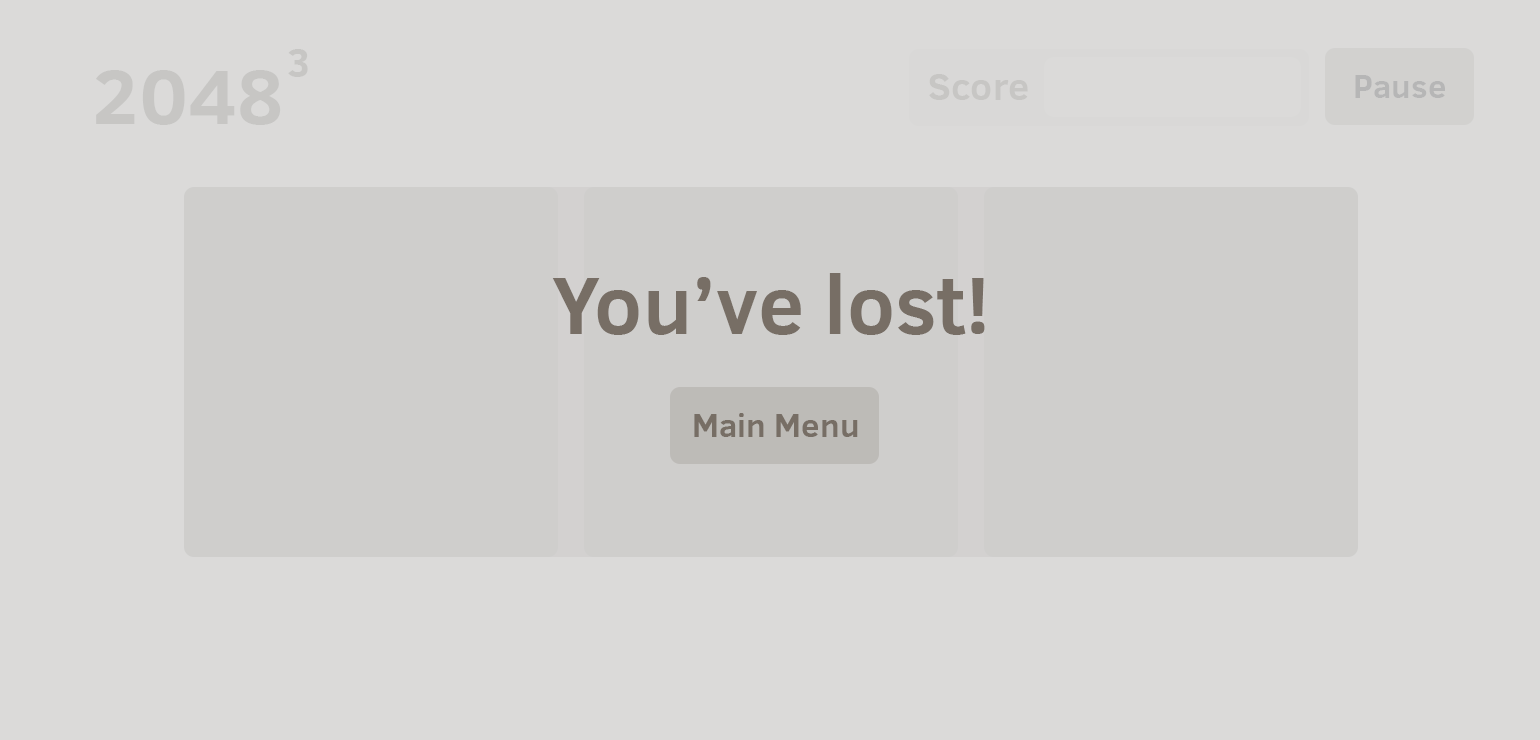
<style>
.page{position:relative;width:1540px;height:740px;background:#dbdad9}
.page>*{position:absolute;margin:0}
.t1{font:40.4px "ClearSans-Bold";color:#c7c6c4}
.t2{font:79px "ClearSans-Bold";color:#c7c6c4}
.t3{font:38.5px "ClearSans-Bold";color:#c7c6c4}
.t4{font:33.3px "ClearSans-Bold";color:#b6b6b6}
.t5{font:83.3px "ClearSans-Bold";color:#776e65}
.t6{font:33.3px "ClearSans-Bold";color:#776e65}
</style>
<div class="page">
<p class="t1" style="left:288px;top:49px;width:20px;height:28px">3</p>
<p class="t2" style="left:96px;top:70px;width:185px;height:55px">2048</p>
<p class="t3" style="left:929px;top:74px;width:99px;height:26px">Score</p>
<p class="t4" style="left:1355px;top:75px;width:90px;height:23px">Pause</p>
<p class="t5" style="left:552px;top:273px;width:433px;height:62px">You’ve lost!</p>
<p class="t6" style="left:694px;top:413px;width:164px;height:24px">Main Menu</p>
</div>
